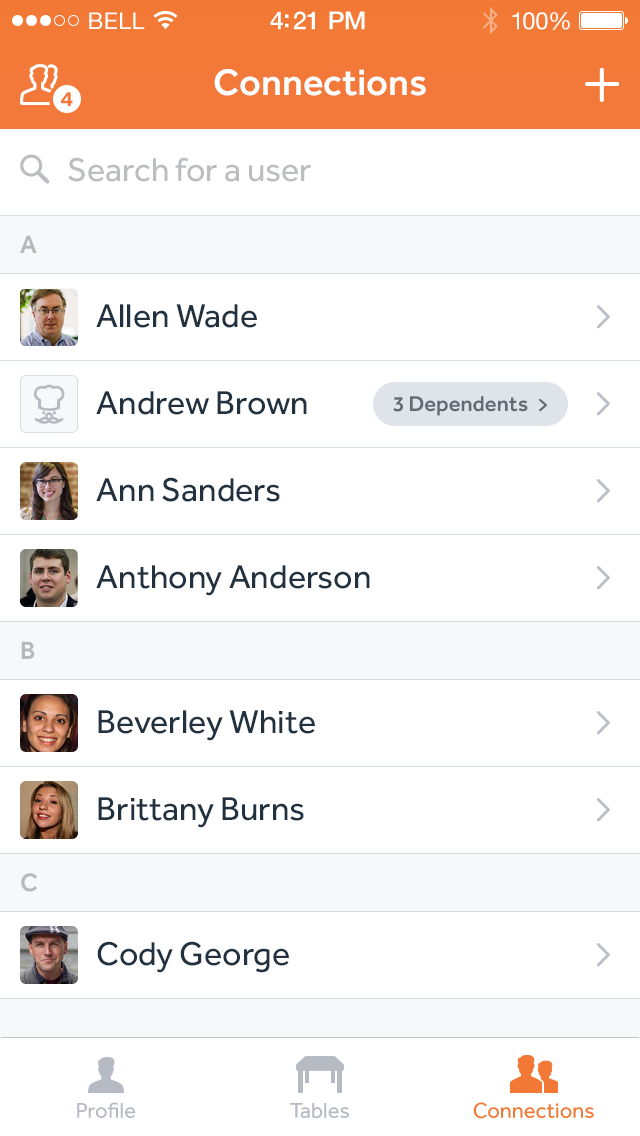
<style>
.page{position:relative;width:640px;height:1136px;background:#ffffff}
.page>*{position:absolute;margin:0}
.t1{font:23px "HelveticaNeue";letter-spacing:0.02em;color:#ffffff}
.t2{font:25px "HelveticaNeue-Medium";letter-spacing:-0.02em;color:#ffffff}
.t3{font:24px "HelveticaNeue";letter-spacing:-0.02em;color:#ffffff}
.t4{font:38px "Effra-Medium";color:#ffffff}
.t5{font:20px "Gibson-SemiBold";color:#f27939}
.t6{font:34px "Effra-Regular";color:#bbbdc1}
.t7{font:26px "Effra-Medium";color:#b5b9be}
.t8{font:34px "Effra-Regular";color:#22313f}
.t9{font:22px "Effra-Medium";color:#626a73}
.t10{font:22px "Effra-Regular";color:#b5bac3}
.t11{font:22px "Effra-Regular";color:#f27935}
</style>
<div class="page">
<p class="t1" style="left:89px;top:12px;width:56px;height:17px">BELL</p>
<p class="t2" style="left:270px;top:11px;width:95px;height:19px">4:21 PM</p>
<p class="t3" style="left:512px;top:12px;width:58px;height:18px">100%</p>
<p class="t4" style="left:214px;top:69px;width:212px;height:27px">Connections</p>
<p class="t5" style="left:61px;top:92px;width:12px;height:14px">4</p>
<p class="t6" style="left:68px;top:157px;width:243px;height:25px">Search for a user</p>
<p class="t7" style="left:20px;top:235px;width:17px;height:18px">A</p>
<p class="t8" style="left:96px;top:304px;width:161px;height:24px">Allen Wade</p>
<p class="t8" style="left:96px;top:391px;width:211px;height:24px">Andrew Brown</p>
<p class="t9" style="left:393px;top:396px;width:135px;height:20px">3 Dependents</p>
<p class="t8" style="left:96px;top:477px;width:184px;height:25px">Ann Sanders</p>
<p class="t8" style="left:96px;top:565px;width:274px;height:31px">Anthony Anderson</p>
<p class="t7" style="left:21px;top:641px;width:14px;height:18px">B</p>
<p class="t8" style="left:98px;top:710px;width:217px;height:31px">Beverley White</p>
<p class="t8" style="left:98px;top:797px;width:206px;height:31px">Brittany Burns</p>
<p class="t7" style="left:21px;top:873px;width:16px;height:19px">C</p>
<p class="t8" style="left:97px;top:941px;width:192px;height:32px">Cody George</p>
<p class="t10" style="left:77px;top:1102px;width:59px;height:16px">Profile</p>
<p class="t10" style="left:290px;top:1103px;width:59px;height:15px">Tables</p>
<p class="t11" style="left:473px;top:1102px;width:121px;height:17px">Connections</p>
</div>
